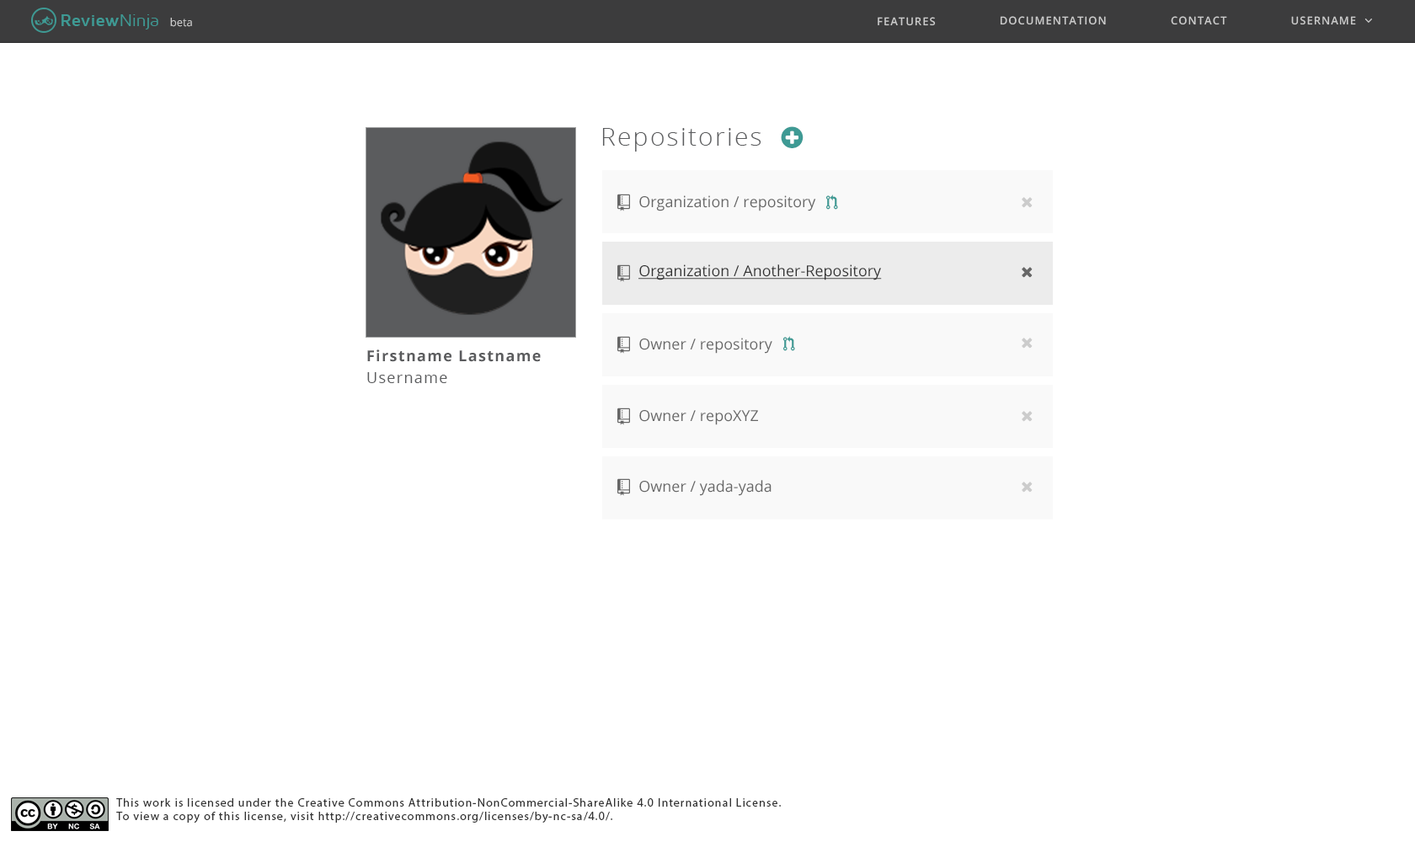
<style>
.page{position:relative;width:1415px;height:842px;background:#ffffff}
.page>*{position:absolute;margin:0}
.t1{font:11px "OpenSans";color:#cccccc}
.t2{font:11px "OpenSans-Semibold";letter-spacing:0.075em;color:#cccccc}
.t3{font:25.3px "OpenSans-Light";letter-spacing:0.075em;color:#5b5c5e}
.t4{font:15.2px "OpenSans";color:#666666}
.t5{font:15.2px "OpenSans";color:#333333;text-decoration:underline}
.t6{font:15.2px "OpenSans-Bold";letter-spacing:0.075em;color:#5b5c5e}
.t7{font:15.2px "OpenSans";letter-spacing:0.075em;color:#5b5c5e}
.t8{font:11.8px/13.5px "MyriadPro-Regular";letter-spacing:0.075em;color:#333333}
</style>
<div class="page">
<p class="t1" style="left:170px;top:18px;width:22px;height:9px">beta</p>
<p class="t2" style="left:878px;top:17px;width:58px;height:9px">FEATURES</p>
<p class="t2" style="left:1000px;top:16px;width:106px;height:9px">DOCUMENTATION</p>
<p class="t2" style="left:1171px;top:16px;width:57px;height:9px">CONTACT</p>
<p class="t2" style="left:1292px;top:16px;width:64px;height:9px">USERNAME</p>
<p class="t3" style="left:602px;top:128px;width:160px;height:24px">Repositories</p>
<p class="t4" style="left:639px;top:195px;width:177px;height:16px">Organization / repository</p>
<p class="t5" style="left:639px;top:265px;width:243px;height:16px">Organization / Another-Repository</p>
<p class="t4" style="left:639px;top:338px;width:134px;height:16px">Owner / repository</p>
<p class="t6" style="left:367px;top:350px;width:174px;height:12px">Firstname Lastname</p>
<p class="t7" style="left:367px;top:372px;width:80px;height:11px">Username</p>
<p class="t4" style="left:639px;top:410px;width:119px;height:15px">Owner / repoXYZ</p>
<p class="t4" style="left:639px;top:480px;width:133px;height:16px">Owner / yada-yada</p>
<p class="t8" style="left:116px;top:799px;width:665px;height:25px">This work is licensed under the Creative Commons Attribution-NonCommercial-ShareAlike 4.0 International License. <br>To view a copy of this license, visit http://creativecommons.org/licenses/by-nc-sa/4.0/.</p>
</div>
